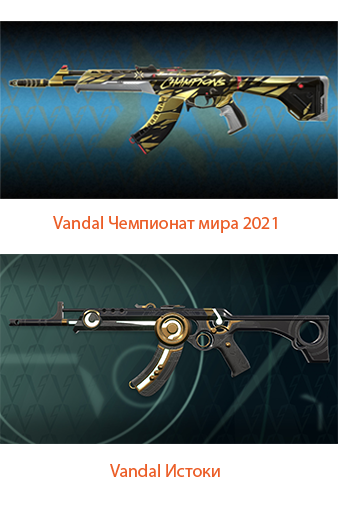
<style>
.page{position:relative;width:338px;height:507px;background:#ffffff}
.page>*{position:absolute;margin:0}
.t1{font:18px "MyriadPro-Regular";color:#eb5e28}
</style>
<div class="page">
<p class="t1" style="left:53px;top:216px;width:224px;height:17px">Vandal Чемпионат мира 2021</p>
<p class="t1" style="left:110px;top:464px;width:110px;height:13px">Vandal Истоки</p>
</div>
